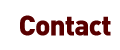
<style>
.page{position:relative;width:120px;height:50px;background:#ffffff}
.page>*{position:absolute;margin:0}
.t1{font:28px "DIN-Black";letter-spacing:-0.025em;color:#580000}
</style>
<div class="page">
<p class="t1" style="left:20px;top:15px;width:91px;height:21px">Contact</p>
</div>
